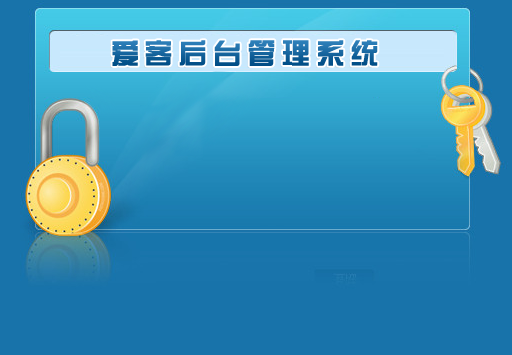
<style>
.page{position:relative;width:512px;height:355px;background:#1873aa}
.page>*{position:absolute;margin:0}
.t1{font:28px "ADZYJT--GB1-0";letter-spacing:0.2em;font-weight:bold}
</style>
<div class="page">
<p class="t1" style="left:112px;top:40px;width:266px;height:26px">爱客后台管理系统</p>
</div>
